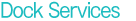
<style>
.page{position:relative;width:136px;height:21px;background:#ffffff}
.page>*{position:absolute;margin:0}
.t1{font:20px "GothicMB101Pro-Regular";letter-spacing:-0.06em;color:#1dbcc0;scale:0.9 1}
</style>
<div class="page">
<p class="t1" style="left:1px;top:1px;width:119px;height:17px">Dock Services</p>
</div>
